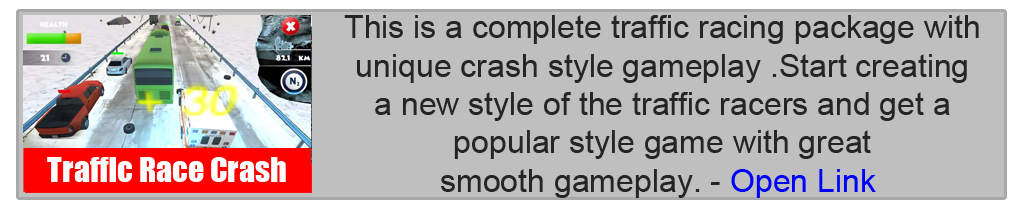
<style>
.page{position:relative;width:1024px;height:210px;background:#bfbfbf}
.page>*{position:absolute;margin:0}
.t1{font:32px "ArialMT";color:#252525}
.t2{font:32px "ArialMT";color:#0000ff}
.t3{font:32px "Impact";color:#ffffff}
</style>
<div class="page">
<p class="t1" style="left:344px;top:15px;width:635px;height:183px;text-align:center">This is a complete traffic racing package with <br>unique crash style gameplay .Start creating <br>a new style of the traffic racers and get a <br>popular style game with great <br>smooth gameplay. - <span class="t2">Open Link</span></p>
<p class="t3" style="left:47px;top:157px;width:239px;height:25px">Traffic Race Crash</p>
</div>
